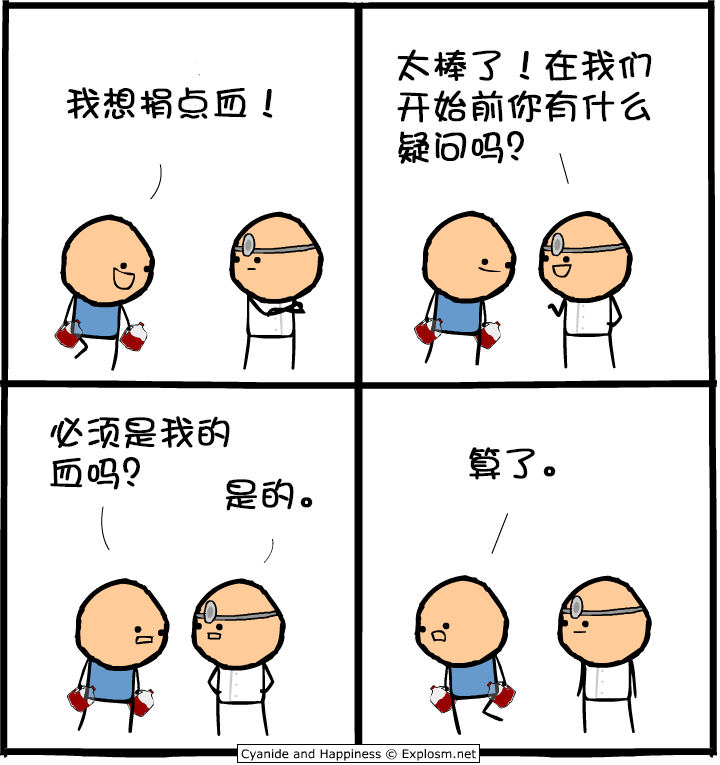
<style>
.page{position:relative;width:720px;height:765px;background:#ffffff}
.page>*{position:absolute;margin:0}
.t1{font:36px/41px "DFPShaoNvW5";color:#000000;font-weight:bold}
.t2{font:36px "DFPShaoNvW5";color:#000000;font-weight:bold}
</style>
<div class="page">
<p class="t1" style="left:397px;top:49px;width:255px;height:115px">太棒了！在我们<br>开始前你有什么<br>疑问吗？</p>
<p class="t2" style="left:66px;top:87px;width:207px;height:33px">我想捐点血！</p>
<p class="t1" style="left:50px;top:416px;width:180px;height:74px">必须是我的<br>血吗？</p>
<p class="t2" style="left:469px;top:447px;width:87px;height:33px">算了。</p>
<p class="t2" style="left:226px;top:478px;width:87px;height:33px">是的。</p>
</div>
